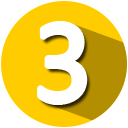
<style>
.page{position:relative;width:128px;height:128px;background:#ffcc00}
.page>*{position:absolute;margin:0}
.t1{font:100px "MicrosoftYaHei";color:#ffffff}
</style>
<div class="page">
<p class="t1" style="left:40px;top:24px;width:45px;height:78px">3</p>
</div>
